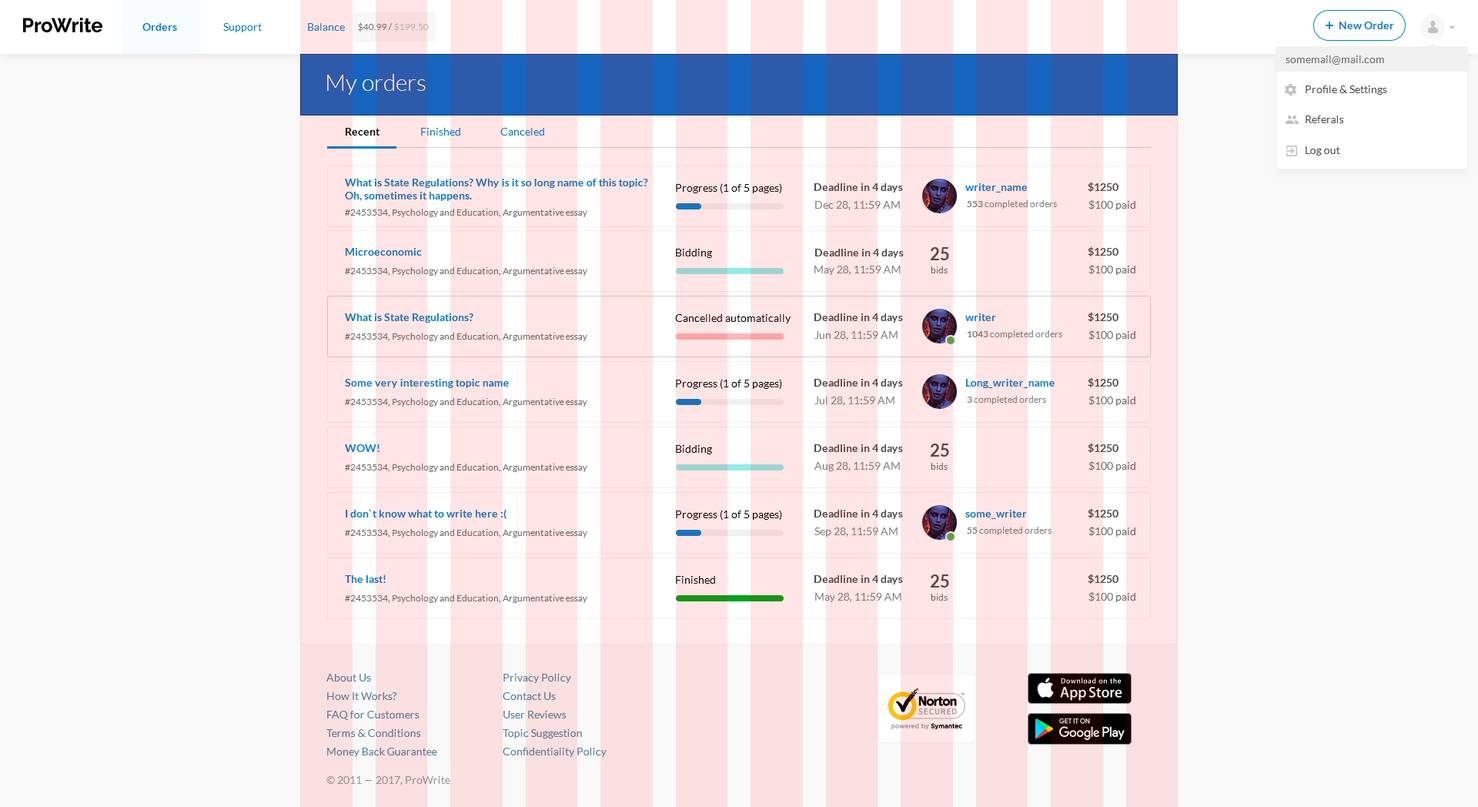
<style>
.page{position:relative;width:1478px;height:807px;background:#f9f9f9}
.page>*{position:absolute;margin:0}
.t1{font:10.8px "Lato-Bold";color:#0080d1}
.t2{font:10.8px "Lato-Regular";color:#0080d1}
.t3{font:10.8px "Lato-Regular";color:#1a73bc}
.t4{font:9.2px "Lato-Regular";color:#7b7b7b;text-transform:uppercase}
.t5{font:9.2px "Lato-Regular";color:#c1c1c1;text-transform:uppercase}
.t6{font:10.8px "Lato-Regular";color:#6d6d6c}
.t7{font:23.1px "Lato-Light";color:#ffe5e5}
.t8{font:10.8px "Lato-Regular";color:#4e4e4e}
.t9{font:10.8px "Lato-Bold"}
.t10{font:10.8px "Lato-Regular"}
.t11{font:10.8px "Lato-Regular";color:#1b0101}
.t12{font:10.8px "Lato-Bold";color:#4e4e4e}
.t13{font:10.8px "Lato-Bold";color:#1a73bc}
.t14{font:9.2px "Lato-Regular";color:#6f6f6f}
.t15{font:10.8px "Lato-Regular";color:#828282}
.t16{font:9.2px "Lato-Regular";color:#828282}
.t17{font:9.2px "Lato-Bold";color:#828282}
.t18{font:10.8px "Lato-Regular";color:#6f6f6f}
.t19{font:16.9px "Lato-Bold";color:#4e4e4e}
.t20{font:10.8px/18.5px "Lato-Regular";color:#537f9b}
.t21{font:10.8px "Lato-Regular";color:#979797}
</style>
<div class="page">
<p class="t1" style="left:142px;top:23px;width:35px;height:8px">Orders</p>
<p class="t2" style="left:223px;top:23px;width:39px;height:9px">Support</p>
<p class="t3" style="left:308px;top:23px;width:37px;height:8px">Balance</p>
<p class="t4" style="left:358px;top:22px;width:71px;height:10px">$40.99 / <span class="t5">$199.50</span></p>
<p class="t1" style="left:1339px;top:22px;width:55px;height:7px">New Order</p>
<p class="t6" style="left:1286px;top:55px;width:98px;height:10px">somemail@mail.com</p>
<p class="t7" style="left:327px;top:74px;width:99px;height:21px">My orders</p>
<p class="t8" style="left:1306px;top:85px;width:81px;height:10px">Profile &amp; Settings</p>
<p class="t8" style="left:1306px;top:115px;width:38px;height:8px">Referals</p>
<p class="t9" style="left:346px;top:128px;width:34px;height:7px">Recent</p>
<p class="t10" style="left:421px;top:128px;width:39px;height:7px">Finished</p>
<p class="t10" style="left:500px;top:128px;width:44px;height:7px">Canceled</p>
<p class="t8" style="left:1306px;top:146px;width:34px;height:10px">Log out</p>
<p class="t9" style="left:345px;top:179px;width:303px;height:22px">What is State Regulations? Why is it so long name of this topic? Oh, sometimes it happens.</p>
<p class="t11" style="left:676px;top:183px;width:106px;height:10px">Progress (1 of 5 pages)</p>
<p class="t12" style="left:814px;top:183px;width:89px;height:9px">Deadline in 4 days</p>
<p class="t13" style="left:965px;top:183px;width:62px;height:9px">writer_name</p>
<p class="t12" style="left:1088px;top:182px;width:31px;height:10px">$1250</p>
<p class="t14" style="left:345px;top:209px;width:242px;height:8px">#2453534, Psychology and Education, Argumentative essay</p>
<p class="t15" style="left:815px;top:201px;width:85px;height:9px">Dec 28, 11:59 AM</p>
<p class="t16" style="left:967px;top:200px;width:90px;height:9px"><span class="t17">553 </span>completed orders</p>
<p class="t18" style="left:1089px;top:200px;width:46px;height:10px">$100 paid</p>
<p class="t9" style="left:346px;top:248px;width:76px;height:8px">Microeconomic</p>
<p class="t11" style="left:676px;top:249px;width:36px;height:9px">Bidding</p>
<p class="t12" style="left:815px;top:249px;width:89px;height:9px">Deadline in 4 days</p>
<p class="t19" style="left:931px;top:247px;width:18px;height:13px">25</p>
<p class="t12" style="left:1088px;top:246px;width:31px;height:10px">$1250</p>
<p class="t14" style="left:345px;top:267px;width:242px;height:9px">#2453534, Psychology and Education, Argumentative essay</p>
<p class="t15" style="left:814px;top:266px;width:87px;height:9px">May 28, 11:59 AM</p>
<p class="t14" style="left:931px;top:266px;width:17px;height:7px">bids</p>
<p class="t18" style="left:1089px;top:265px;width:46px;height:10px">$100 paid</p>
<p class="t9" style="left:345px;top:313px;width:128px;height:10px">What is State Regulations?</p>
<p class="t11" style="left:675px;top:314px;width:116px;height:9px">Cancelled automatically</p>
<p class="t12" style="left:814px;top:313px;width:89px;height:10px">Deadline in 4 days</p>
<p class="t9" style="left:965px;top:313px;width:31px;height:8px">writer</p>
<p class="t12" style="left:1088px;top:312px;width:31px;height:10px">$1250</p>
<p class="t14" style="left:345px;top:333px;width:242px;height:8px">#2453534, Psychology and Education, Argumentative essay</p>
<p class="t15" style="left:814px;top:331px;width:84px;height:9px">Jun 28, 11:59 AM</p>
<p class="t16" style="left:968px;top:330px;width:94px;height:9px"><span class="t17">1043 </span>completed orders</p>
<p class="t18" style="left:1089px;top:330px;width:46px;height:10px">$100 paid</p>
<p class="t12" style="left:1088px;top:377px;width:31px;height:10px">$1250</p>
<p class="t9" style="left:345px;top:379px;width:164px;height:9px">Some very interesting topic name</p>
<p class="t11" style="left:676px;top:379px;width:106px;height:10px">Progress (1 of 5 pages)</p>
<p class="t12" style="left:814px;top:379px;width:89px;height:9px">Deadline in 4 days</p>
<p class="t9" style="left:966px;top:379px;width:89px;height:9px">Long_writer_name</p>
<p class="t14" style="left:345px;top:398px;width:242px;height:8px">#2453534, Psychology and Education, Argumentative essay</p>
<p class="t15" style="left:814px;top:396px;width:81px;height:10px">Jul 28, 11:59 AM</p>
<p class="t16" style="left:967px;top:396px;width:79px;height:8px"><span class="t17">3 </span>completed orders</p>
<p class="t18" style="left:1089px;top:396px;width:46px;height:10px">$100 paid</p>
<p class="t9" style="left:345px;top:444px;width:35px;height:8px">WOW!</p>
<p class="t11" style="left:676px;top:445px;width:36px;height:9px">Bidding</p>
<p class="t12" style="left:814px;top:444px;width:89px;height:9px">Deadline in 4 days</p>
<p class="t19" style="left:931px;top:443px;width:18px;height:13px">25</p>
<p class="t12" style="left:1088px;top:443px;width:31px;height:10px">$1250</p>
<p class="t15" style="left:814px;top:462px;width:86px;height:9px">Aug 28, 11:59 AM</p>
<p class="t18" style="left:1089px;top:461px;width:46px;height:10px">$100 paid</p>
<p class="t14" style="left:345px;top:463px;width:242px;height:9px">#2453534, Psychology and Education, Argumentative essay</p>
<p class="t14" style="left:931px;top:463px;width:17px;height:7px">bids</p>
<p class="t9" style="left:346px;top:509px;width:161px;height:10px">I don`t know what to write here :(</p>
<p class="t11" style="left:676px;top:510px;width:106px;height:10px">Progress (1 of 5 pages)</p>
<p class="t12" style="left:814px;top:510px;width:89px;height:9px">Deadline in 4 days</p>
<p class="t13" style="left:965px;top:510px;width:62px;height:9px">some_writer</p>
<p class="t12" style="left:1088px;top:508px;width:31px;height:10px">$1250</p>
<p class="t14" style="left:345px;top:529px;width:242px;height:8px">#2453534, Psychology and Education, Argumentative essay</p>
<p class="t15" style="left:814px;top:527px;width:84px;height:10px">Sep 28, 11:59 AM</p>
<p class="t16" style="left:967px;top:527px;width:85px;height:8px"><span class="t17">55 </span>completed orders</p>
<p class="t18" style="left:1089px;top:527px;width:46px;height:10px">$100 paid</p>
<p class="t9" style="left:345px;top:575px;width:41px;height:8px">The last!</p>
<p class="t11" style="left:676px;top:576px;width:39px;height:8px">Finished</p>
<p class="t12" style="left:814px;top:575px;width:89px;height:9px">Deadline in 4 days</p>
<p class="t19" style="left:931px;top:574px;width:18px;height:13px">25</p>
<p class="t12" style="left:1088px;top:574px;width:31px;height:10px">$1250</p>
<p class="t15" style="left:815px;top:593px;width:86px;height:9px">May 28, 11:59 AM</p>
<p class="t14" style="left:931px;top:594px;width:17px;height:6px">bids</p>
<p class="t18" style="left:1089px;top:592px;width:46px;height:10px">$100 paid</p>
<p class="t14" style="left:345px;top:594px;width:242px;height:9px">#2453534, Psychology and Education, Argumentative essay</p>
<p class="t20" style="left:326px;top:674px;width:111px;height:83px">About Us<br>How It Works?<br>FAQ for Customers<br>Terms &amp; Conditions<br>Money Back Guarantee</p>
<p class="t20" style="left:503px;top:674px;width:104px;height:83px">Privacy Policy<br>Contact Us<br>User Reviews<br>Topic Suggestion<br>Confidentiality Policy</p>
<p class="t21" style="left:326px;top:776px;width:124px;height:9px">© 2011 — 2017, ProWrite</p>
</div>
